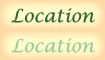
<style>
.page{position:relative;width:105px;height:60px}
.page>*{position:absolute;margin:0}
.t1{font:18px "LucidaCalligraphy-Italic";color:#336633}
.t2{font:18px "LucidaCalligraphy-Italic";color:#99cc99}
</style>
<div class="page">
<p class="t1" style="left:11px;top:8px;width:84px;height:15px">Location</p>
<p class="t2" style="left:11px;top:38px;width:84px;height:15px">Location</p>
</div>
